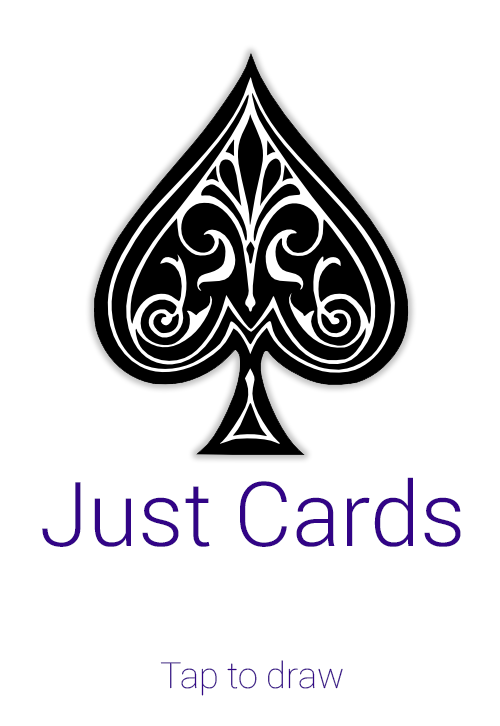
<style>
.page{position:relative;width:500px;height:726px;background:#ffffff}
.page>*{position:absolute;margin:0}
.t1{font:89.8px "Roboto-Light";color:#320486}
.t2{font:35.9px "Roboto-Thin";color:#320486}
</style>
<div class="page">
<p class="t1" style="left:42px;top:477px;width:419px;height:70px">Just Cards</p>
<p class="t2" style="left:160px;top:660px;width:183px;height:36px">Tap to draw</p>
</div>
